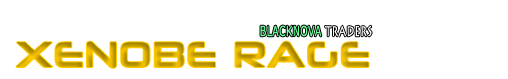
<style>
.page{position:relative;width:508px;height:79px;background:#ffffff}
.page>*{position:absolute;margin:0}
.t1{font:14px "MSReferenceSansSerif";letter-spacing:0.04em;color:#66ff99;scale:0.67 1}
.t2{font:14px "LithosPro-Regular";letter-spacing:0.04em;color:#ffffff;scale:0.67 1}
.t3{font:36px "NeuropoliticalRg-Regular";letter-spacing:0.04em}
</style>
<div class="page">
<p class="t1" style="left:260px;top:25px;width:62px;height:12px">BLACKNOVA</p>
<p class="t2" style="left:325px;top:25px;width:47px;height:12px">TRADERS</p>
<p class="t3" style="left:16px;top:41px;width:353px;height:27px">XENOBE RAGE</p>
</div>
